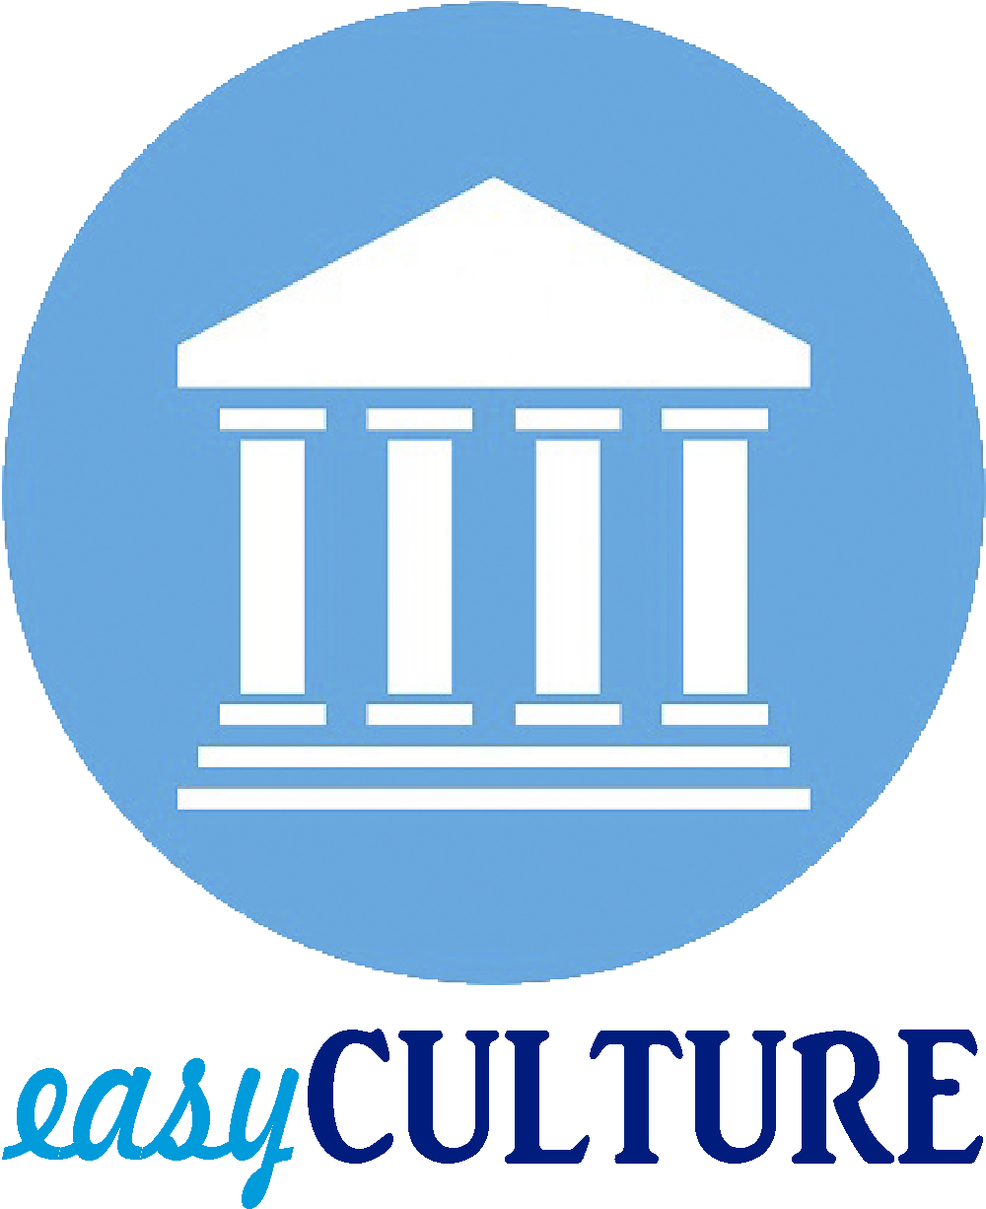
<style>
.page{position:relative;width:986px;height:1209px;background:#ffffff}
.page>*{position:absolute;margin:0}
.t1{font:197.2px "ARJULIAN";color:#001d7e;scale:0.81 1}
.t2{font:197.2px "Freehand521BT-RegularC";color:#009bdb;scale:0.76 1}
</style>
<div class="page">
<p class="t1" style="left:308px;top:1029px;width:675px;height:135px">CULTURE</p>
<p class="t2" style="left:2px;top:1058px;width:297px;height:151px">easy</p>
</div>
